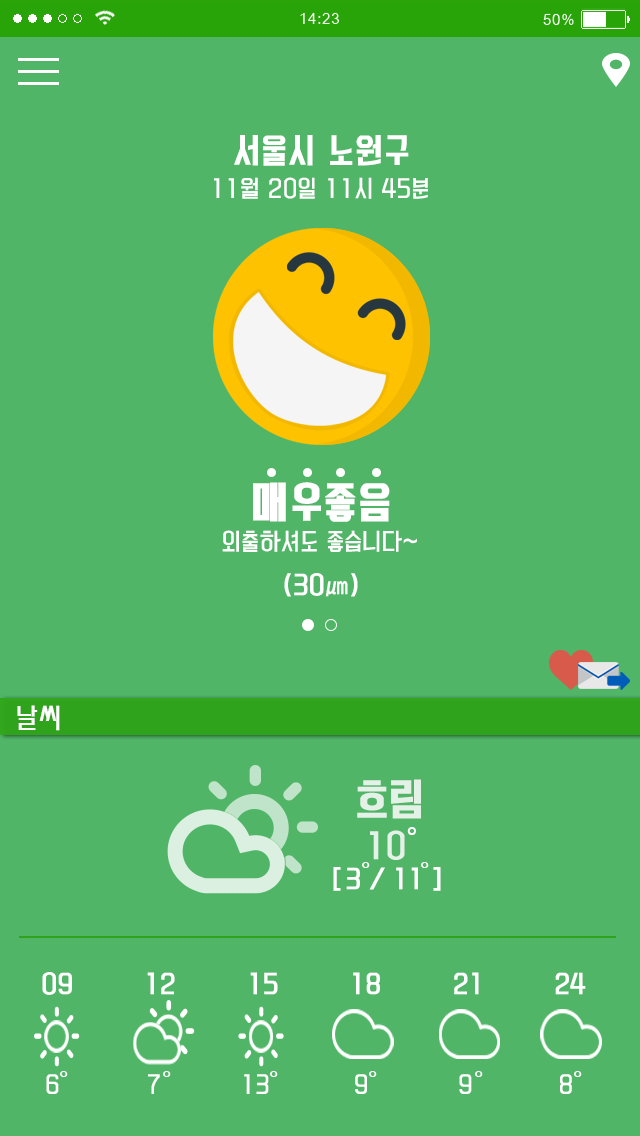
<style>
.page{position:relative;width:640px;height:1136px;background:#51b568}
.page>*{position:absolute;margin:0}
.t1{font:32px "KoreanYNMYT-B";letter-spacing:0.025em;color:#ffffff}
.t2{font:22px "KoreanYNMYT-L";letter-spacing:0.025em;color:#ffffff}
.t3{font:40px "KoreanYNMYT-B";letter-spacing:0.025em;color:#ffffff;font-weight:bold}
.t4{font:24px "KoreanYNMYT-M";letter-spacing:0.025em;color:#ffffff}
.t5{font:28px "MoeumTR-HM";letter-spacing:0.025em;color:#ffffff}
.t6{font:40px "KoreanYNMYT-M";color:#e3f1e6;font-weight:bold}
.t7{font:31px "KoreanYNMYT-M";color:#e3f1e6}
.t8{font:32.1px "MoeumTR-HM";color:#ffffff}
.t9{font:24px "KoreanYNMYT-M";color:#ffffff}
.t10{font:28px "MoeumTR-HM";color:#ffffff}
.t11{font:22px "KoreanYNMYT-L";color:#ffffff}
</style>
<div class="page">
<p class="t1" style="left:234px;top:135px;width:175px;height:31px">서울시 노원구</p>
<p class="t2" style="left:214px;top:177px;width:214px;height:22px">11월 20일 11시 45분</p>
<p class="t3" style="left:253px;top:482px;width:137px;height:40px">매우좋음</p>
<p class="t2" style="left:222px;top:530px;width:195px;height:22px">외출하셔도 좋습니다~</p>
<p class="t4" style="left:284px;top:573px;width:74px;height:24px">(30㎛)</p>
<p class="t5" style="left:17px;top:705px;width:43px;height:26px">날씨</p>
<p class="t6" style="left:357px;top:779px;width:64px;height:40px">흐림</p>
<p class="t7" style="left:370px;top:830px;width:35px;height:30px">10</p>
<p class="t8" style="left:407px;top:827px;width:9px;height:8px">°</p>
<p class="t9" style="left:333px;top:867px;width:108px;height:24px">[ 3 / 11 ]</p>
<p class="t10" style="left:362px;top:862px;width:8px;height:6px">°</p>
<p class="t10" style="left:421px;top:862px;width:8px;height:6px">°</p>
<p class="t9" style="left:42px;top:972px;width:544px;height:23px">09          12         15          18         21          24</p>
<p class="t10" style="left:60px;top:1071px;width:8px;height:6px">°</p>
<p class="t10" style="left:163px;top:1071px;width:8px;height:6px">°</p>
<p class="t10" style="left:270px;top:1071px;width:8px;height:6px">°</p>
<p class="t10" style="left:369px;top:1071px;width:8px;height:6px">°</p>
<p class="t10" style="left:475px;top:1071px;width:8px;height:6px">°</p>
<p class="t10" style="left:574px;top:1071px;width:8px;height:6px">°</p>
<p class="t11" style="left:46px;top:1074px;width:526px;height:20px">6               7               13           9             9            8</p>
</div>
